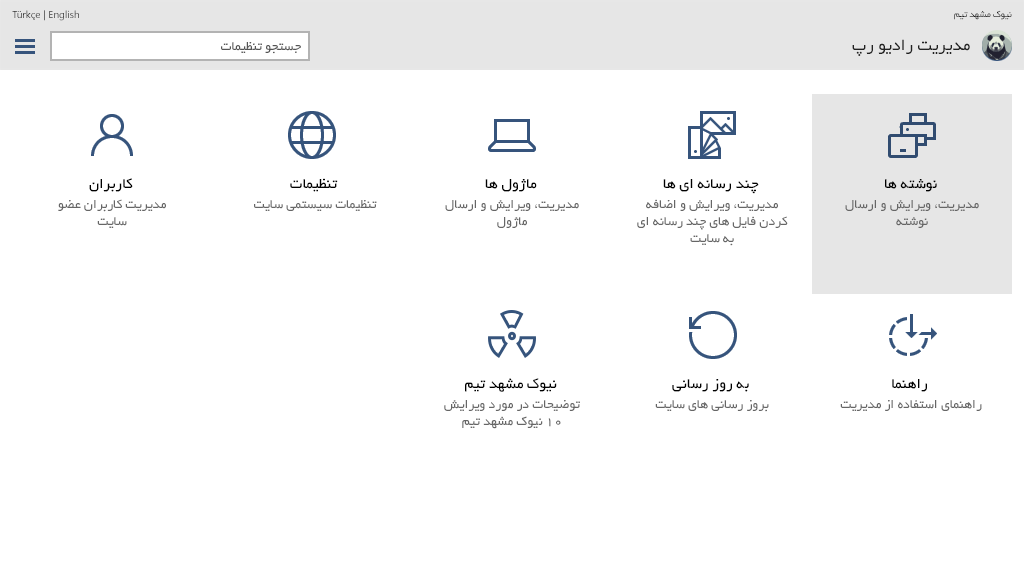
<style>
.page{position:relative;width:1024px;height:576px;background:#ffffff}
.page>*{position:absolute;margin:0}
.t1{font:10px "SegoeUI"}
.t2{font:10px "BYekan";color:#212121}
.t3{font:18px "BYekan";color:#212121}
.t4{font:14px "BYekan";color:#555555}
.t5{font:16px "BYekan";color:#000000}
.t6{font:14px "BYekan";color:#666666}
</style>
<div class="page">
<p class="t1" style="left:12px;top:10px;width:67px;height:11px">Türkçe | English</p>
<p class="t2" style="left:954px;top:10px;width:58px;height:10px">نیوک مشهد تیم</p>
<p class="t3" style="left:852px;top:39px;width:118px;height:17px">مدیریت رادیو رپ</p>
<p class="t4" style="left:221px;top:42px;width:80px;height:12px">جستجو تنظیمات</p>
<p class="t5" style="left:89px;top:178px;width:44px;height:14px">کاربران</p>
<p class="t5" style="left:290px;top:178px;width:48px;height:14px">تنظیمات</p>
<p class="t5" style="left:485px;top:179px;width:52px;height:13px">ماژول ها</p>
<p class="t5" style="left:663px;top:179px;width:96px;height:15px">چند رسانه ای ها</p>
<p class="t5" style="left:885px;top:179px;width:52px;height:13px">نوشته ها</p>
<p class="t6" style="left:58px;top:199px;width:108px;height:29px;text-align:center">مدیریت کاربران عضو<br>سایت</p>
<p class="t6" style="left:254px;top:200px;width:123px;height:11px">تنظیمات سیستمی سایت</p>
<p class="t6" style="left:445px;top:200px;width:134px;height:28px;text-align:center">مدیریت، ویرایش و ارسال<br>ماژول</p>
<p class="t6" style="left:637px;top:199px;width:151px;height:47px;text-align:center">مدیریت، ویرایش و اضافه<br>کردن فایل های چند رسانه ای<br>به سایت</p>
<p class="t6" style="left:845px;top:200px;width:134px;height:28px;text-align:center">مدیریت، ویرایش و ارسال<br>نوشته</p>
<p class="t5" style="left:465px;top:378px;width:92px;height:14px">نیوک مشهد تیم</p>
<p class="t5" style="left:672px;top:379px;width:77px;height:13px">به روز رسانی</p>
<p class="t5" style="left:892px;top:379px;width:35px;height:13px">راهنما</p>
<p class="t6" style="left:444px;top:400px;width:136px;height:29px;text-align:center">توضیحات در مورد ویرایش<br>10 نیوک مشهد تیم</p>
<p class="t6" style="left:655px;top:400px;width:114px;height:12px">بروز رسانی های سایت</p>
<p class="t6" style="left:840px;top:400px;width:142px;height:11px">راهنمای استفاده از مدیریت</p>
</div>
